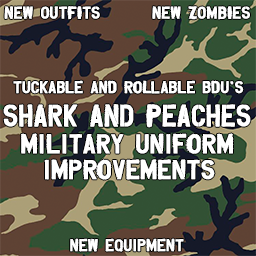
<style>
.page{position:relative;width:256px;height:256px}
.page>*{position:absolute;margin:0}
.t1{font:13.3px "Overspray";color:#ffffff;font-weight:bold}
.t2{font:24px "Overspray";color:#ffffff;font-weight:bold;scale:0.92 1}
.t3{font:21.3px "Overspray";color:#ffffff;font-weight:bold}
</style>
<div class="page">
<p class="t1" style="left:4px;top:6px;width:96px;height:14px">NEW OUTFITS</p>
<p class="t1" style="left:152px;top:6px;width:98px;height:14px">NEW ZOMBIES</p>
<p class="t1" style="left:13px;top:80px;width:231px;height:14px">tuckable and rollable bdu’s</p>
<p class="t2" style="left:3px;top:104px;width:248px;height:24px">SHARK AND PEACHES</p>
<p class="t3" style="left:21px;top:133px;width:213px;height:47px">military uniform<br>  improvements</p>
<p class="t1" style="left:70px;top:238px;width:114px;height:14px">new equipment</p>
</div>
